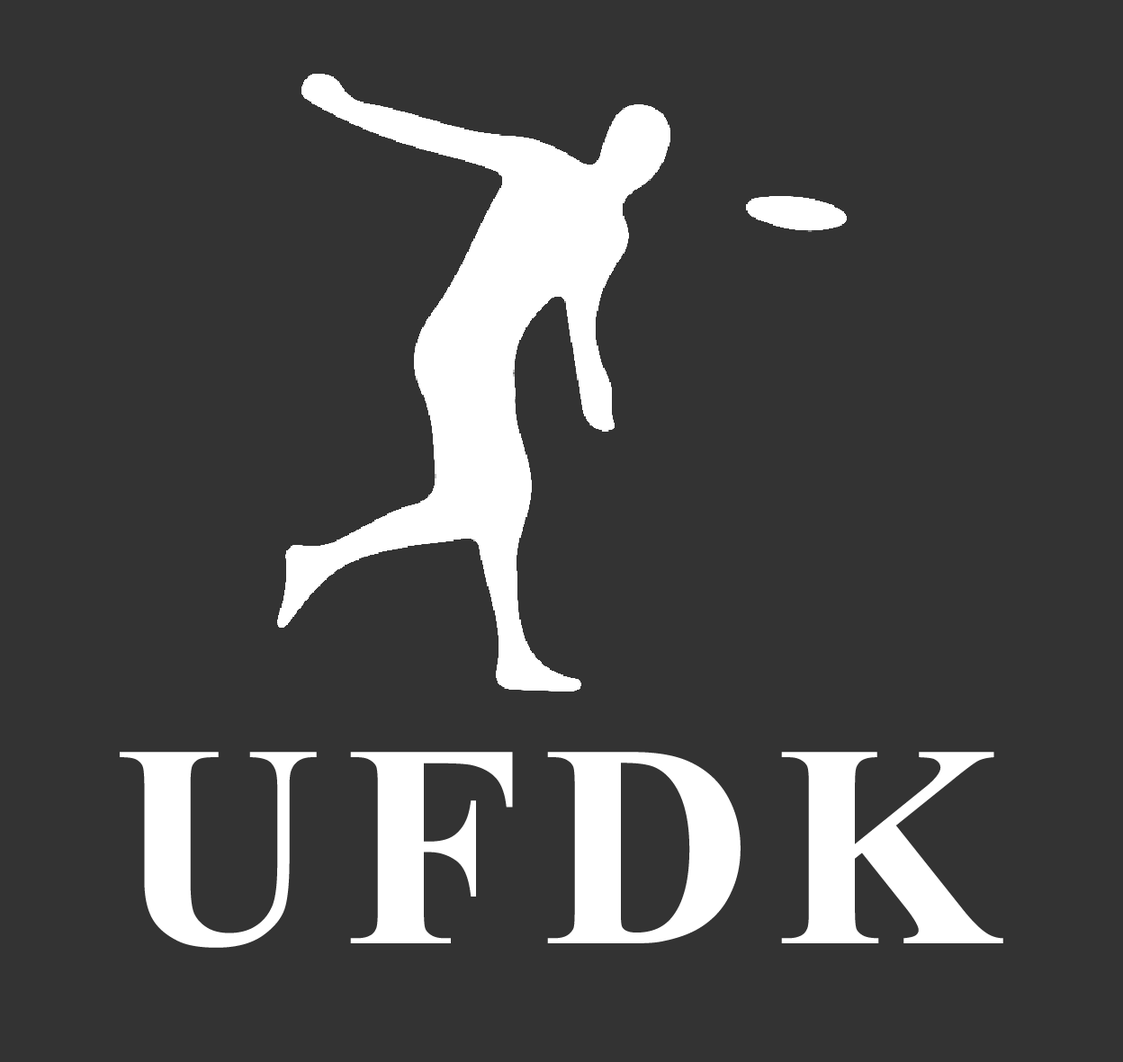
<style>
.page{position:relative;width:1123px;height:1062px;background:#333333}
.page>*{position:absolute;margin:0}
.t1{font:288.6px "TimesNewRomanPS-BoldMT";letter-spacing:0.08em;color:#ffffff}
</style>
<div class="page">
<p class="t1" style="left:120px;top:752px;width:883px;height:196px">UFDK</p>
</div>
